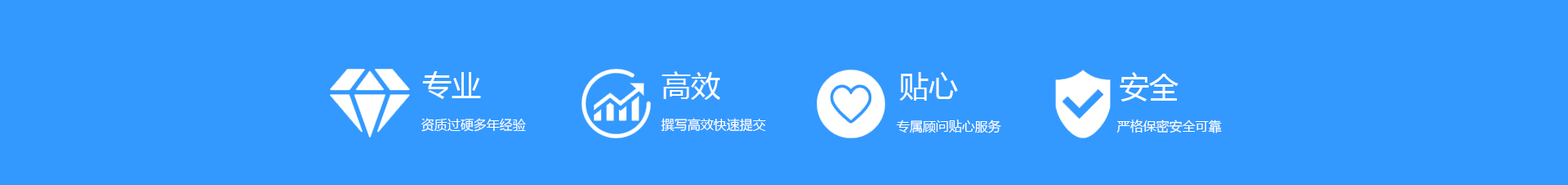
<style>
.page{position:relative;width:1568px;height:185px;background:#3399ff}
.page>*{position:absolute;margin:0}
.t1{font:29.4px "MicrosoftYaHei";color:#ffffff}
.t2{font:13.1px "MicrosoftYaHei";color:#ffffff}
</style>
<div class="page">
<p class="t1" style="left:422px;top:71px;width:59px;height:28px">专业</p>
<p class="t1" style="left:662px;top:71px;width:58px;height:29px">高效</p>
<p class="t1" style="left:899px;top:72px;width:59px;height:28px">贴心</p>
<p class="t1" style="left:1120px;top:72px;width:58px;height:29px">安全</p>
<p class="t2" style="left:421px;top:118px;width:105px;height:13px">资质过硬多年经验</p>
<p class="t2" style="left:661px;top:118px;width:105px;height:13px">撰写高效快速提交</p>
<p class="t2" style="left:897px;top:119px;width:104px;height:14px">专属顾问贴心服务</p>
<p class="t2" style="left:1116px;top:119px;width:106px;height:14px">严格保密安全可靠</p>
</div>
